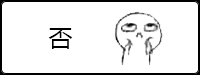
<style>
.page{position:relative;width:200px;height:75px;background:#ffffff}
.page>*{position:absolute;margin:0}
.t1{font:24px "MicrosoftYaHei";color:#000000}
</style>
<div class="page">
<p class="t1" style="left:48px;top:28px;width:25px;height:21px">否</p>
</div>
